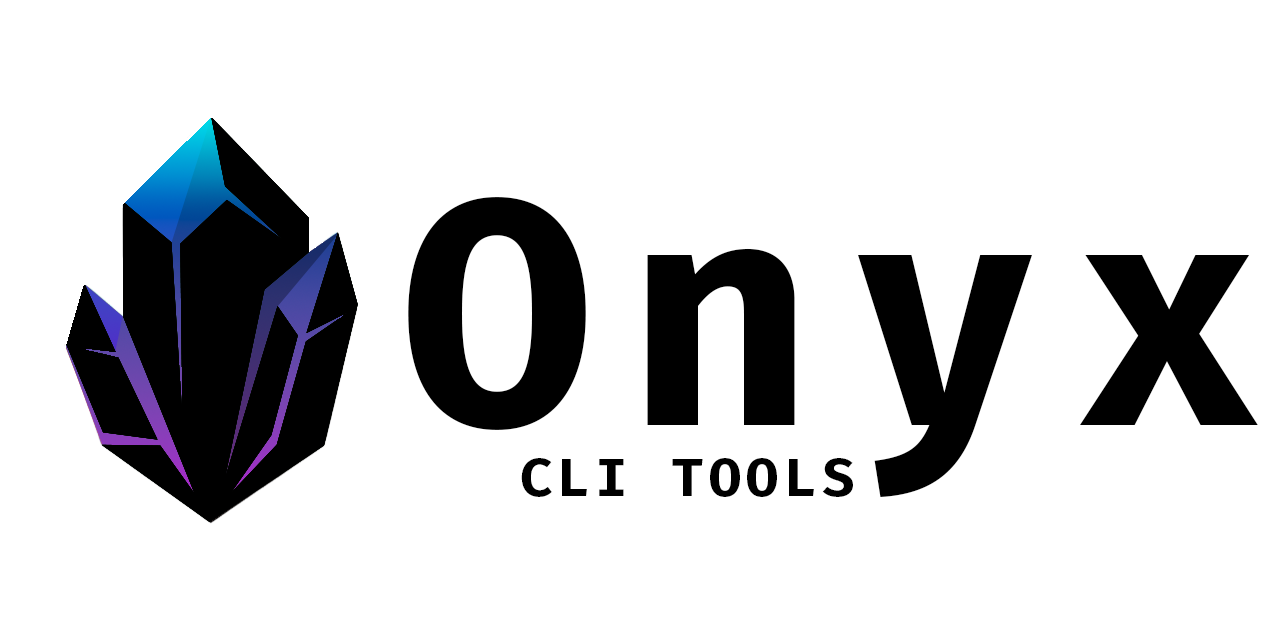
<style>
.page{position:relative;width:1280px;height:640px;background:#ffffff}
.page>*{position:absolute;margin:0}
.t1{font:319.7px "FiraCode-Bold";letter-spacing:0.1em;color:#000000}
.t2{font:54px "FiraCode-Bold";letter-spacing:0.1em;color:#000000}
</style>
<div class="page">
<p class="t1" style="left:408px;top:197px;width:850px;height:300px">Onyx</p>
<p class="t2" style="left:521px;top:458px;width:332px;height:39px">CLI TOOLS</p>
</div>
